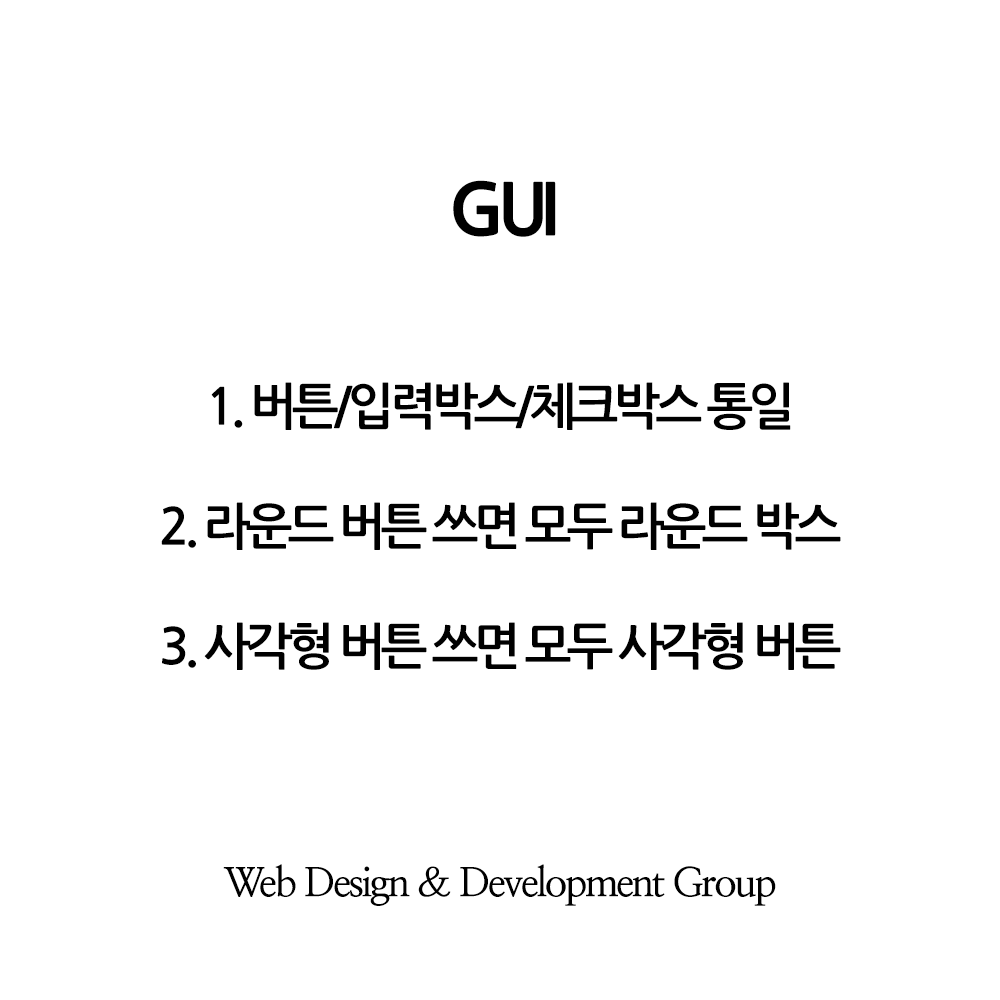
<style>
.page{position:relative;width:1000px;height:1000px;background:#ffffff}
.page>*{position:absolute;margin:0}
.t1{font:70px "NanumGothicExtraBold";letter-spacing:-0.1em;color:#000000}
.t2{font:50px "NanumGothicBold";letter-spacing:-0.1em;color:#000000}
.t3{font:40px "NanumMyeongjoBold";letter-spacing:-0.06em;color:#000000}
</style>
<div class="page">
<p class="t1" style="left:453px;top:180px;width:103px;height:57px">GUI</p>
<p class="t2" style="left:161px;top:382px;width:680px;height:288px;text-align:center">1. 버튼/입력박스/체크박스 통일<br><br>2. 라운드 버튼 쓰면 모두 라운드 박스<br><br>3. 사각형 버튼 쓰면 모두 사각형 버튼</p>
<p class="t3" style="left:223px;top:864px;width:553px;height:42px">Web Design &amp; Development Group</p>
</div>
